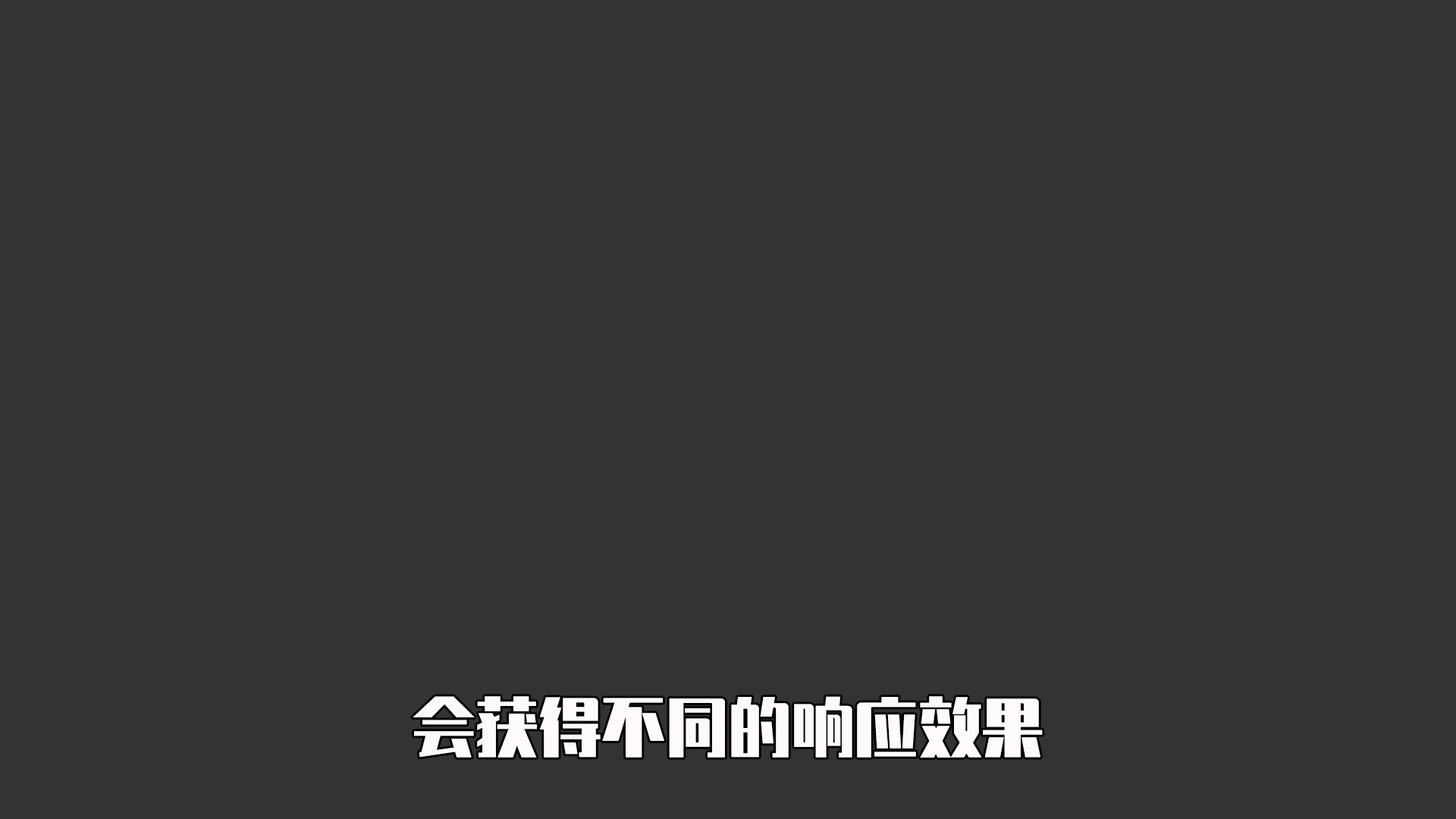
<style>
.page{position:relative;width:1456px;height:819px;background:#333333}
.page>*{position:absolute;margin:0}
.t1{font:63.2px "ZhenyanGB-Regular";color:#fefafa}
</style>
<div class="page">
<p class="t1" style="left:413px;top:696px;width:630px;height:62px">会获得不同的响应效果</p>
</div>
